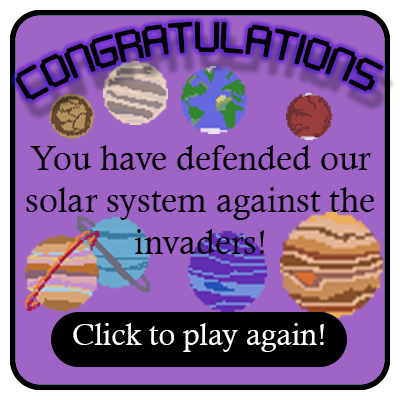
<style>
.page{position:relative;width:400px;height:400px;background:#9f65c6}
.page>*{position:absolute;margin:0}
.t1{font:43.6px "Digitaltech";color:#000000}
.t2{font:35px "CalistoMT";color:#000000}
.t3{font:31px "CalistoMT";color:#ffffff}
</style>
<div class="page">
<p class="t1" style="left:15px;top:21px;width:369px;height:79px">Congratulations!</p>
<p class="t2" style="left:26px;top:145px;width:348px;height:109px;text-align:center">You have defended our<br>solar system against the invaders!</p>
<p class="t3" style="left:73px;top:323px;width:251px;height:29px">Click to play again!</p>
</div>
